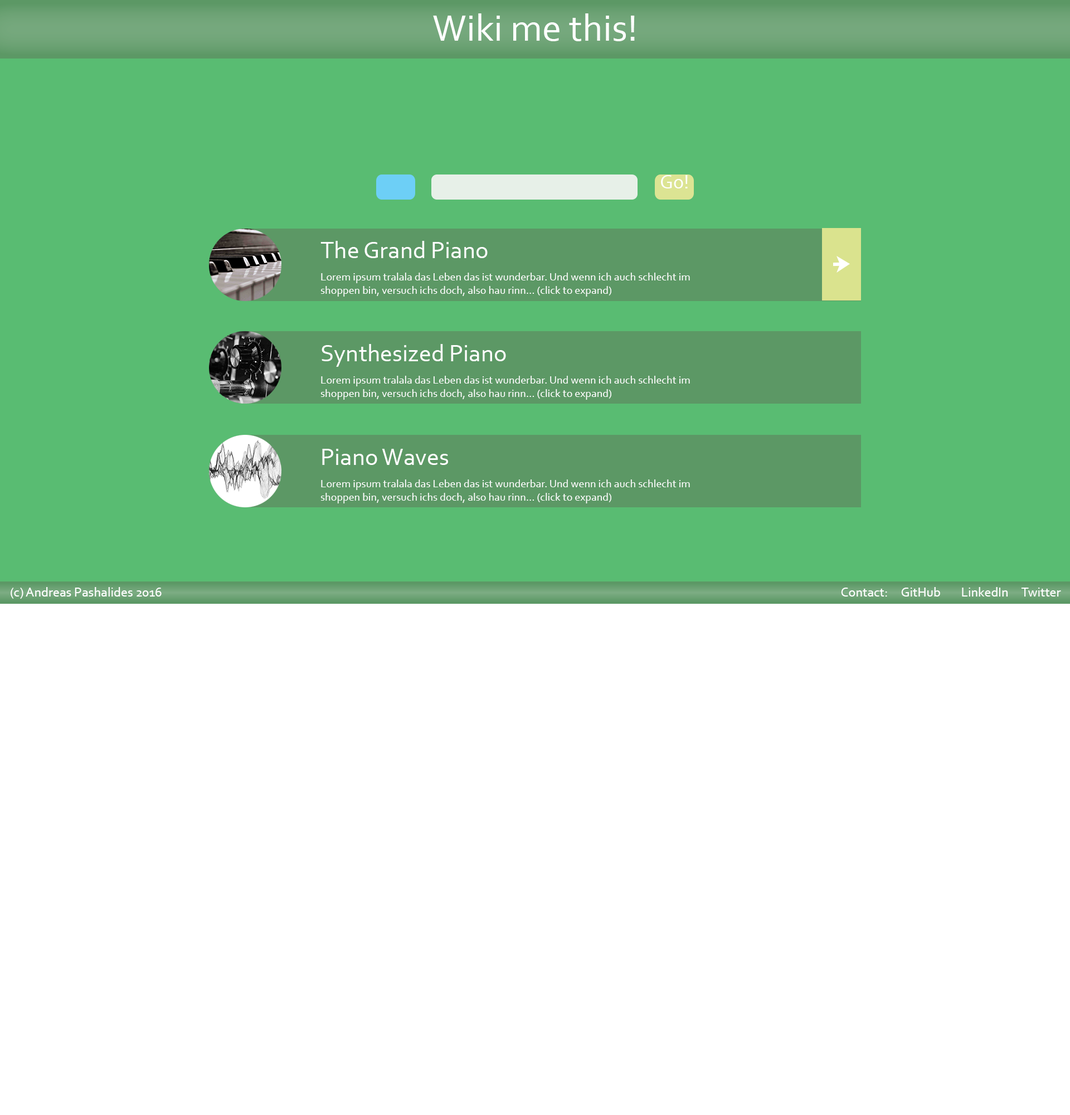
<style>
.page{position:relative;width:1070px;height:1115px;background:#ffffff}
.page>*{position:absolute;margin:0}
.t1{font:38.5px "Corbel";color:#ffffff}
.t2{font:20.1px "Corbel";color:#ffffff}
.t3{font:24.5px "Corbel";color:#ffffff}
.t4{font:11.1px "Corbel";color:#ffffff}
.t5{font:13.4px "Corbel";color:#ffffff}
</style>
<div class="page">
<p class="t1" style="left:433px;top:13px;width:202px;height:28px">Wiki me this!</p>
<p class="t2" style="left:661px;top:175px;width:27px;height:13px">Go!</p>
<p class="t3" style="left:320px;top:241px;width:168px;height:17px">The Grand Piano</p>
<p class="t4" style="left:320px;top:272px;width:370px;height:24px">Lorem ipsum tralala das Leben das ist wunderbar. Und wenn ich auch schlecht im shoppen bin, versuch ichs doch, also hau rinn... (click to expand)</p>
<p class="t3" style="left:322px;top:344px;width:184px;height:23px">Synthesized Piano</p>
<p class="t4" style="left:320px;top:376px;width:370px;height:24px">Lorem ipsum tralala das Leben das ist wunderbar. Und wenn ich auch schlecht im shoppen bin, versuch ichs doch, also hau rinn... (click to expand)</p>
<p class="t3" style="left:322px;top:449px;width:126px;height:16px">Piano Waves</p>
<p class="t4" style="left:320px;top:479px;width:370px;height:24px">Lorem ipsum tralala das Leben das ist wunderbar. Und wenn ich auch schlecht im shoppen bin, versuch ichs doch, also hau rinn... (click to expand)</p>
<p class="t5" style="left:11px;top:587px;width:151px;height:11px">(c) Andreas Pashalides 2016</p>
<p class="t5" style="left:841px;top:587px;width:220px;height:9px">Contact:  GitHub  LinkedIn  Twitter</p>
</div>
